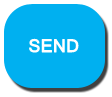
<style>
.page{position:relative;width:112px;height:97px;background:#00b0f0}
.page>*{position:absolute;margin:0}
.t1{font:19px "Shruti";color:#ffffff;font-weight:bold}
</style>
<div class="page">
<p class="t1" style="left:29px;top:38px;width:50px;height:15px">SEND</p>
</div>
